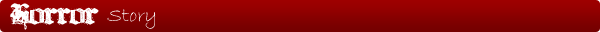
<style>
.page{position:relative;width:600px;height:32px}
.page>*{position:absolute;margin:0}
.t1{font:22.5px "BillHicks5";color:#ffffff}
.t2{font:20px "BradleyHandITC";color:#ffffff}
</style>
<div class="page">
<p class="t1" style="left:10px;top:3px;width:89px;height:27px">Horror</p>
<p class="t2" style="left:107px;top:9px;width:49px;height:20px">Story</p>
</div>
